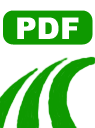
<style>
.page{position:relative;width:95px;height:128px;background:#ffffff}
.page>*{position:absolute;margin:0}
.t1{font:30px "Arial-Black";color:#ffffff}
</style>
<div class="page">
<p class="t1" style="left:17px;top:17px;width:62px;height:22px">PDF</p>
</div>
